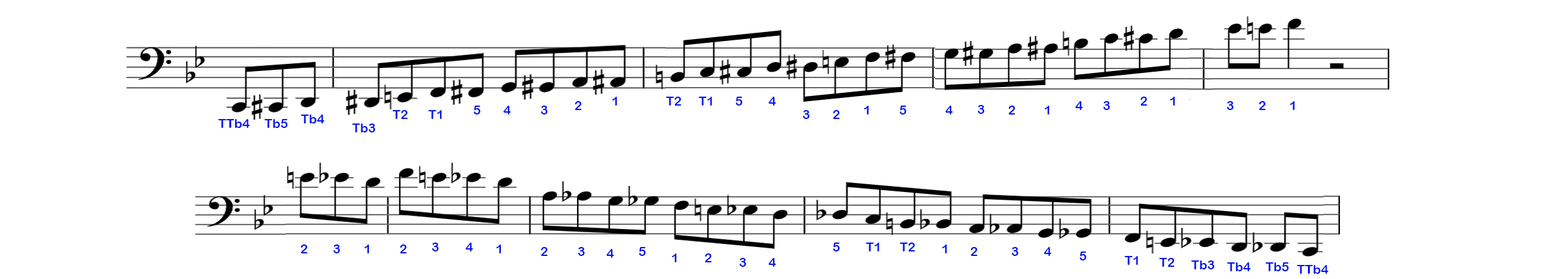
<style>
.page{position:relative;width:1568px;height:279px;background:#ffffff}
.page>*{position:absolute;margin:0}
.t1{font:12.8px "ArialRoundedMTBold";color:#0417ec}
</style>
<div class="page">
<p class="t1" style="left:575px;top:101px;width:7px;height:9px">2</p>
<p class="t1" style="left:612px;top:97px;width:5px;height:9px">1</p>
<p class="t1" style="left:666px;top:97px;width:16px;height:9px">T2</p>
<p class="t1" style="left:698px;top:97px;width:14px;height:9px">T1</p>
<p class="t1" style="left:735px;top:97px;width:7px;height:9px">5</p>
<p class="t1" style="left:769px;top:97px;width:7px;height:9px">4</p>
<p class="t1" style="left:1075px;top:101px;width:8px;height:9px">4</p>
<p class="t1" style="left:1103px;top:101px;width:7px;height:9px">3</p>
<p class="t1" style="left:1140px;top:97px;width:7px;height:9px">2</p>
<p class="t1" style="left:1170px;top:97px;width:5px;height:9px">1</p>
<p class="t1" style="left:1227px;top:101px;width:7px;height:9px">3</p>
<p class="t1" style="left:1259px;top:101px;width:7px;height:9px">2</p>
<p class="t1" style="left:1290px;top:101px;width:4px;height:9px">1</p>
<p class="t1" style="left:392px;top:110px;width:16px;height:9px">T2</p>
<p class="t1" style="left:428px;top:110px;width:14px;height:9px">T1</p>
<p class="t1" style="left:473px;top:106px;width:7px;height:9px">5</p>
<p class="t1" style="left:503px;top:106px;width:8px;height:9px">4</p>
<p class="t1" style="left:541px;top:106px;width:7px;height:9px">3</p>
<p class="t1" style="left:803px;top:110px;width:7px;height:9px">3</p>
<p class="t1" style="left:833px;top:110px;width:7px;height:9px">2</p>
<p class="t1" style="left:864px;top:106px;width:5px;height:9px">1</p>
<p class="t1" style="left:899px;top:106px;width:7px;height:9px">5</p>
<p class="t1" style="left:945px;top:106px;width:8px;height:9px">4</p>
<p class="t1" style="left:977px;top:105px;width:7px;height:9px">3</p>
<p class="t1" style="left:1008px;top:106px;width:7px;height:9px">2</p>
<p class="t1" style="left:1045px;top:106px;width:4px;height:9px">1</p>
<p class="t1" style="left:218px;top:119px;width:32px;height:9px">TTb4</p>
<p class="t1" style="left:264px;top:119px;width:24px;height:9px">Tb5</p>
<p class="t1" style="left:300px;top:115px;width:25px;height:9px">Tb4</p>
<p class="t1" style="left:352px;top:124px;width:23px;height:9px">Tb3</p>
<p class="t1" style="left:300px;top:245px;width:7px;height:9px">2</p>
<p class="t1" style="left:333px;top:245px;width:7px;height:9px">3</p>
<p class="t1" style="left:364px;top:245px;width:5px;height:9px">1</p>
<p class="t1" style="left:400px;top:245px;width:7px;height:9px">2</p>
<p class="t1" style="left:432px;top:243px;width:7px;height:9px">3</p>
<p class="t1" style="left:466px;top:243px;width:7px;height:9px">4</p>
<p class="t1" style="left:496px;top:245px;width:5px;height:9px">1</p>
<p class="t1" style="left:833px;top:243px;width:7px;height:9px">5</p>
<p class="t1" style="left:865px;top:243px;width:14px;height:9px">T1</p>
<p class="t1" style="left:899px;top:243px;width:16px;height:9px">T2</p>
<p class="t1" style="left:942px;top:245px;width:5px;height:9px">1</p>
<p class="t1" style="left:541px;top:247px;width:7px;height:9px">2</p>
<p class="t1" style="left:578px;top:247px;width:7px;height:9px">3</p>
<p class="t1" style="left:607px;top:249px;width:7px;height:9px">4</p>
<p class="t1" style="left:639px;top:247px;width:7px;height:9px">5</p>
<p class="t1" style="left:672px;top:254px;width:4px;height:9px">1</p>
<p class="t1" style="left:705px;top:254px;width:7px;height:9px">2</p>
<p class="t1" style="left:970px;top:247px;width:7px;height:9px">2</p>
<p class="t1" style="left:1011px;top:247px;width:7px;height:9px">3</p>
<p class="t1" style="left:1044px;top:247px;width:8px;height:9px">4</p>
<p class="t1" style="left:1079px;top:252px;width:7px;height:9px">5</p>
<p class="t1" style="left:1124px;top:256px;width:14px;height:9px">T1</p>
<p class="t1" style="left:739px;top:258px;width:7px;height:9px">3</p>
<p class="t1" style="left:769px;top:258px;width:7px;height:9px">4</p>
<p class="t1" style="left:1159px;top:258px;width:16px;height:9px">T2</p>
<p class="t1" style="left:1191px;top:261px;width:23px;height:9px">Tb3</p>
<p class="t1" style="left:1227px;top:263px;width:24px;height:9px">Tb4</p>
<p class="t1" style="left:1265px;top:263px;width:24px;height:9px">Tb5</p>
<p class="t1" style="left:1296px;top:265px;width:32px;height:9px">TTb4</p>
</div>
